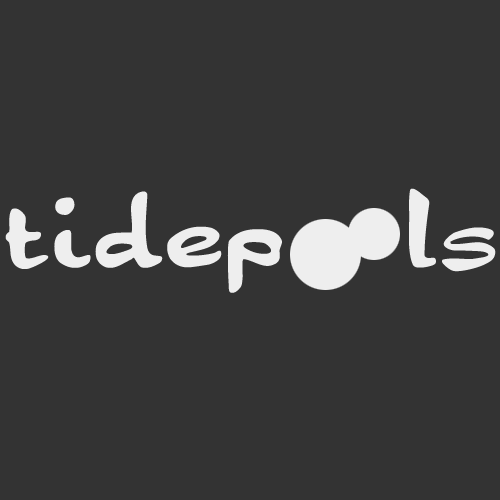
<style>
.page{position:relative;width:500px;height:500px;background:#333333}
.page>*{position:absolute;margin:0}
.t1{font:150px "Dragonfly";color:#eeeeee}
</style>
<div class="page">
<p class="t1" style="left:5px;top:188px;width:491px;height:105px">tidep   ls</p>
</div>
